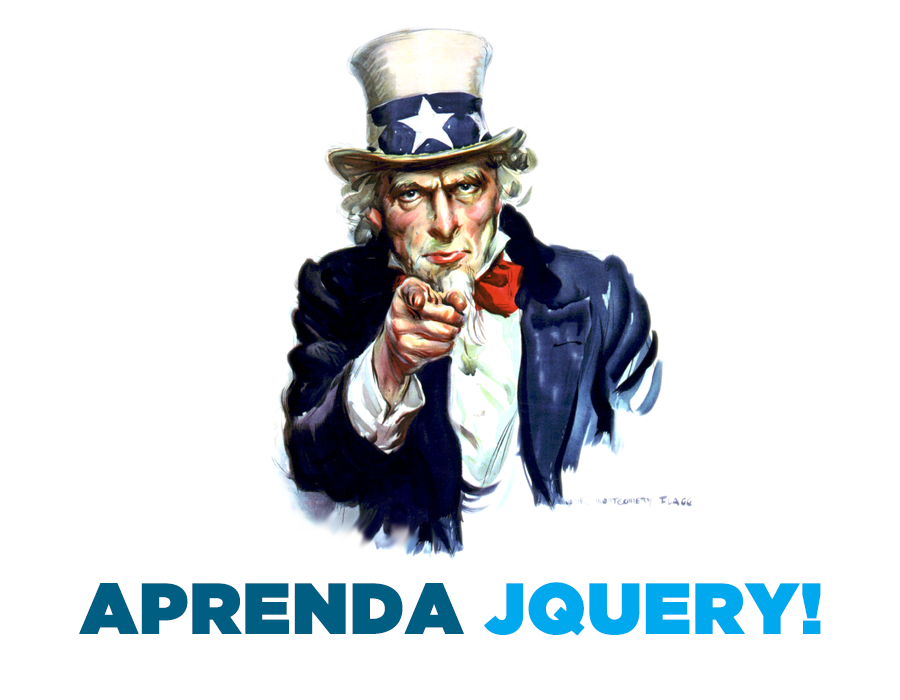
<style>
.page{position:relative;width:900px;height:700px;background:#ffffff}
.page>*{position:absolute;margin:0}
.t1{font:71.4px "GothamUltra";color:#005e83;font-weight:bold}
.t2{font:71.4px "GothamUltra";color:#00a9ee;font-weight:bold}
</style>
<div class="page">
<p class="t1" style="left:79px;top:582px;width:742px;height:54px">APRENDA <span class="t2">JQUERY!</span></p>
</div>
